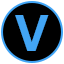
<style>
.page{position:relative;width:64px;height:64px;background:#000000}
.page>*{position:absolute;margin:0}
.t1{font:50px "Arial-BoldMT";color:#42a5f5}
</style>
<div class="page">
<p class="t1" style="left:15px;top:15px;width:34px;height:36px">V</p>
</div>
